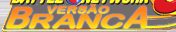
<style>
.page{position:relative;width:176px;height:32px}
.page>*{position:absolute;margin:0}
.t1{font:22.1px "ArialRoundedMTBold";letter-spacing:-0.06em;font-weight:bold;scale:1.49 1}
.t2{font:33px "ArialRoundedMTBold";letter-spacing:-0.06em;font-weight:bold}
.t3{font:22.1px "ArialRoundedMTBold";font-weight:bold;scale:1.49 1}
.t4{font:22.1px "ArialRoundedMTBold";letter-spacing:-0.02em;font-weight:bold;scale:1.49 1}
.t5{font:33px "ArialRoundedMTBold";font-weight:bold}
.t6{font:8.9px "ArialRoundedMTBold";font-weight:bold;scale:1.61 1}
</style>
<div class="page">
<p class="t1" style="left:6px;top:6px;width:141px;height:23px"><span class="t2">B</span><span class="t3">R</span>AN<span class="t4">C</span><span class="t5">A</span></p>
<p class="t6" style="left:47px;top:4px;width:63px;height:10px">VERSÃO</p>
</div>
